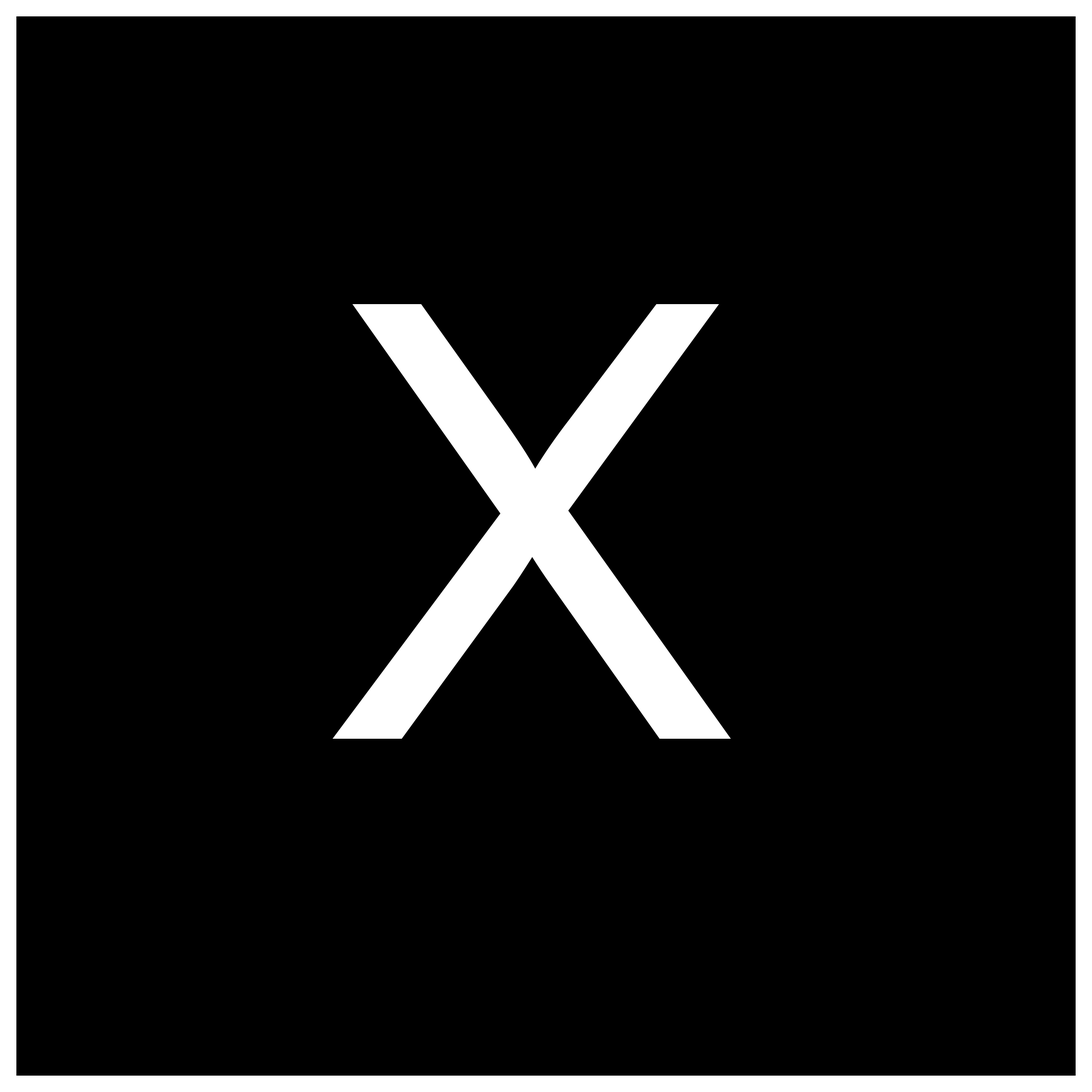
<style>
.page{position:relative;width:1092px;height:1092px;background:#000000}
.page>*{position:absolute;margin:0}
.t1{font:606.7px "ArialMT";color:#ffffff}
</style>
<div class="page">
<p class="t1" style="left:333px;top:304px;width:398px;height:435px">X</p>
</div>
